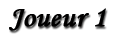
<style>
.page{position:relative;width:120px;height:39px;background:#ffffff}
.page>*{position:absolute;margin:0}
.t1{font:30px "MonotypeCorsiva";color:#010101;font-weight:bold}
</style>
<div class="page">
<p class="t1" style="left:9px;top:8px;width:97px;height:23px">Joueur 1</p>
</div>
